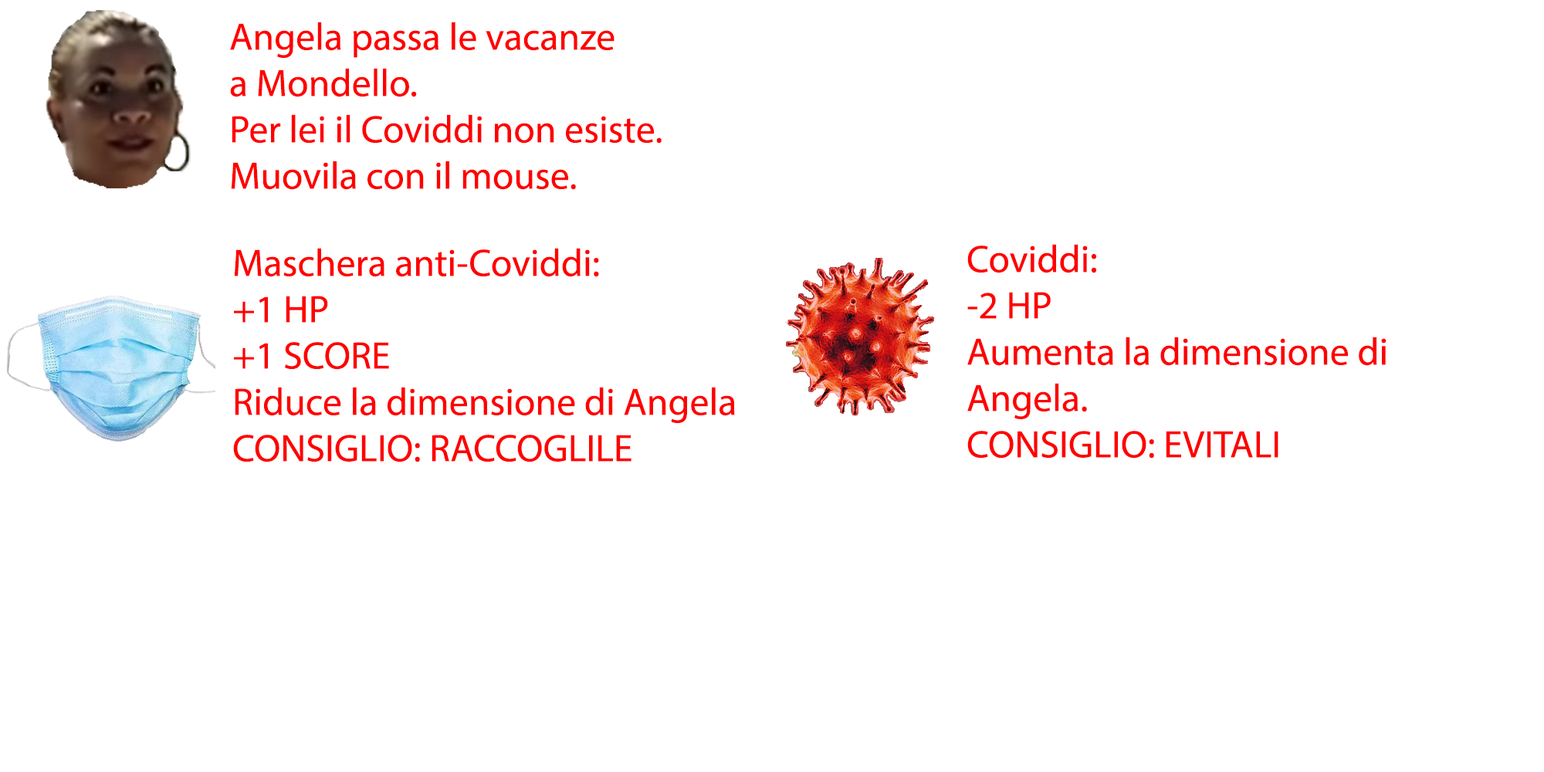
<style>
.page{position:relative;width:1544px;height:772px;background:#ffffff}
.page>*{position:absolute;margin:0}
.t1{font:38.6px "MyriadPro-Regular";color:#ff0000}
</style>
<div class="page">
<p class="t1" style="left:230px;top:22px;width:432px;height:168px">Angela passa le vacanze <br>a Mondello. <br>Per lei il Coviddi non esiste.<br>Muovila con il mouse.</p>
<p class="t1" style="left:968px;top:244px;width:419px;height:215px">Coviddi:<br>-2 HP<br>Aumenta la dimensione di Angela.<br>CONSIGLIO: EVITALI</p>
<p class="t1" style="left:233px;top:248px;width:502px;height:215px">Maschera anti-Coviddi:<br>+1 HP<br>+1 SCORE<br>Riduce la dimensione di Angela<br>CONSIGLIO: RACCOGLILE</p>
</div>
